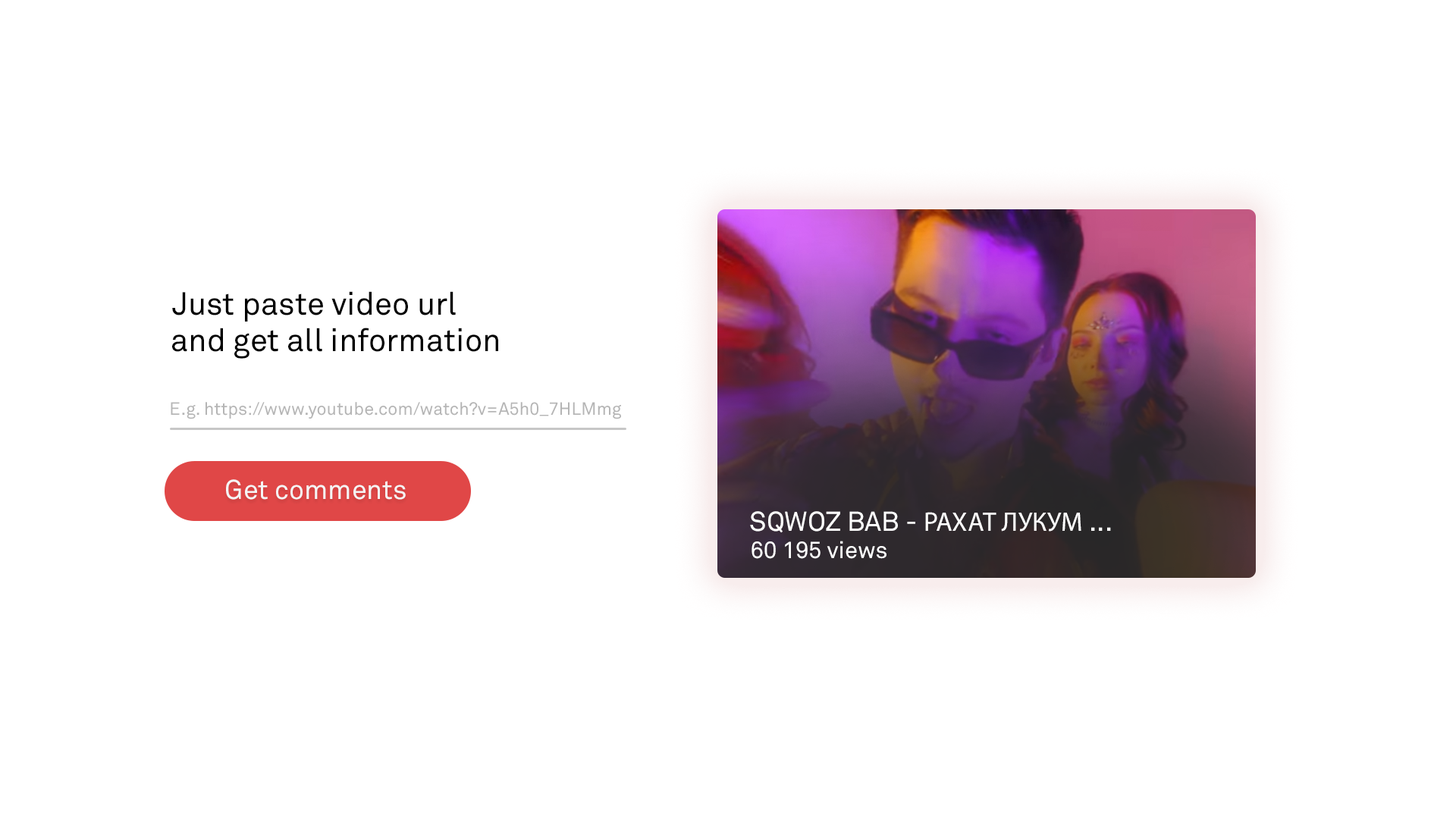
<style>
.page{position:relative;width:1456px;height:819px;background:#ffffff}
.page>*{position:absolute;margin:0}
.t1{font:31.7px "AkkuratPro-Regular";color:#000000}
.t2{font:17.6px "AkkuratPro-Regular";color:#b5b5b5}
.t3{font:27.1px "AkkuratPro-Regular";color:#f5f5f5}
.t4{font:26.9px "AkkuratPro-Regular";color:#ffffff}
.t5{font:26.9px "MyriadPro-Regular";color:#ffffff}
.t6{font:23.5px "AkkuratPro-Regular";color:#ffffff}
</style>
<div class="page">
<p class="t1" style="left:172px;top:291px;width:284px;height:31px">Just paste video url</p>
<p class="t1" style="left:172px;top:328px;width:326px;height:31px">and get all information</p>
<p class="t2" style="left:171px;top:402px;width:450px;height:17px">E.g. https://www.youtube.com/watch?v=A5h0_7HLMmg</p>
<p class="t3" style="left:226px;top:479px;width:180px;height:21px">Get comments</p>
<p class="t4" style="left:750px;top:511px;width:361px;height:22px">SQWOZ BAB - <span class="t5">РАХАТ ЛУКУМ</span> ...</p>
<p class="t6" style="left:751px;top:541px;width:135px;height:18px">60 195 views</p>
</div>
